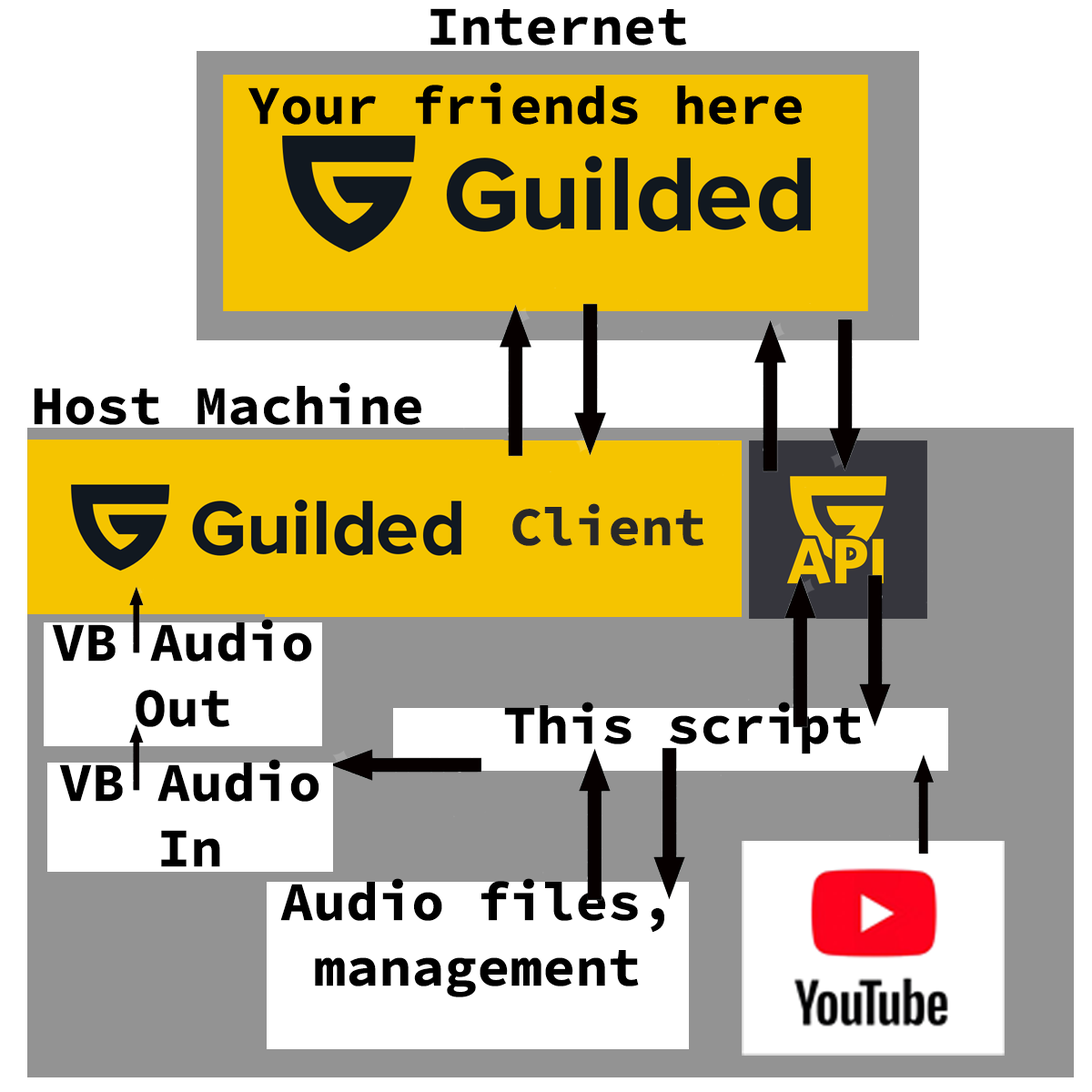
<style>
.page{position:relative;width:1092px;height:1092px;background:#ffffff}
.page>*{position:absolute;margin:0}
.t1{font:54.6px "SourceCodeRoman-Bold";color:#000000}
.t2{font:54.6px "SourceCodeRoman-Bold";color:#282828}
</style>
<div class="page">
<p class="t1" style="left:430px;top:8px;width:257px;height:37px">Internet</p>
<p class="t1" style="left:248px;top:82px;width:554px;height:43px">Your friends here</p>
<p class="t1" style="left:34px;top:382px;width:387px;height:43px">Host Machine</p>
<p class="t2" style="left:512px;top:503px;width:192px;height:43px">Client</p>
<p class="t1" style="left:52px;top:619px;width:260px;height:108px;text-align:center">VB Audio<br>Out</p>
<p class="t1" style="left:504px;top:702px;width:358px;height:52px">This script</p>
<p class="t1" style="left:59px;top:759px;width:260px;height:108px;text-align:center">VB Audio<br>In</p>
<p class="t1" style="left:280px;top:878px;width:384px;height:119px;text-align:center">Audio files,<br>management</p>
</div>
